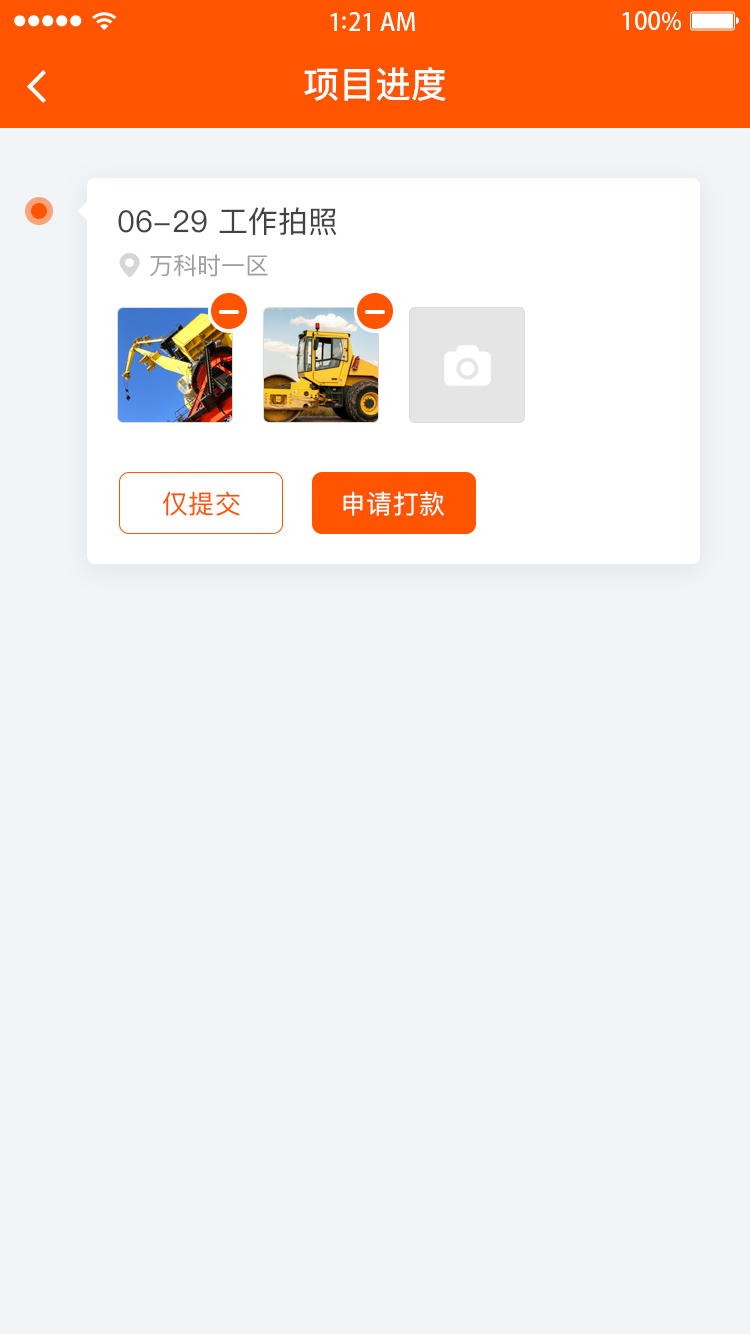
<style>
.page{position:relative;width:750px;height:1334px;background:#f2f5f7}
.page>*{position:absolute;margin:0}
.t1{font:36px "PingFangSC-Medium";color:#ffffff}
.t2{font:30px "PingFangSC-Regular";color:#434343}
.t3{font:24px "PingFangSC-Regular";color:#a0a0a0}
.t4{font:26px "PingFangSC-Regular";letter-spacing:0.02em;color:#ff5400}
.t5{font:26px "PingFangSC-Regular";letter-spacing:0.02em;color:#ffffff}
</style>
<div class="page">
<p class="t1" style="left:304px;top:67px;width:142px;height:34px">项目进度</p>
<p class="t2" style="left:118px;top:207px;width:219px;height:29px">06-29 工作拍照</p>
<p class="t3" style="left:150px;top:254px;width:118px;height:23px">万科时一区</p>
<p class="t4" style="left:162px;top:491px;width:78px;height:25px">仅提交</p>
<p class="t5" style="left:343px;top:491px;width:101px;height:25px">申请打款</p>
</div>
